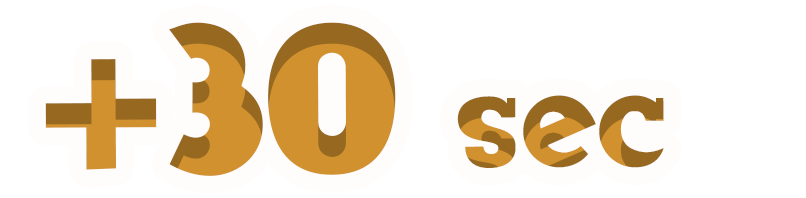
<style>
.page{position:relative;width:806px;height:198px;background:#ffffff}
.page>*{position:absolute;margin:0}
.t1{font:204.1px "BadTyp-Regular";color:#d0912e}
.t2{font:95.6px "BadTyp-Regular"}
</style>
<div class="page">
<p class="t1" style="left:45px;top:22px;width:351px;height:154px">+30</p>
<p class="t2" style="left:457px;top:95px;width:207px;height:73px">sec</p>
</div>
